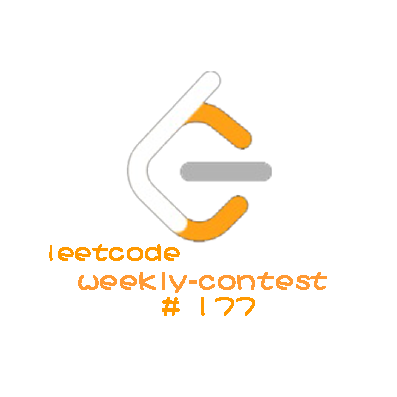
<style>
.page{position:relative;width:397px;height:397px;background:#ffffff}
.page>*{position:absolute;margin:0}
.t1{font:25px "DFPShaoNvW5";letter-spacing:0.02em;color:#ff9900;font-weight:bold}
.t2{font:26.7px "DFPShaoNvW5";letter-spacing:0.02em;color:#ff9933;font-weight:bold}
.t3{font:26.7px "DFPShaoNvW5";letter-spacing:0.02em;color:#ff9900;font-weight:bold}
</style>
<div class="page">
<p class="t1" style="left:49px;top:244px;width:131px;height:17px">leetcode</p>
<p class="t2" style="left:78px;top:272px;width:249px;height:21px">weekly-contest</p>
<p class="t3" style="left:162px;top:297px;width:93px;height:19px"># 177</p>
</div>
